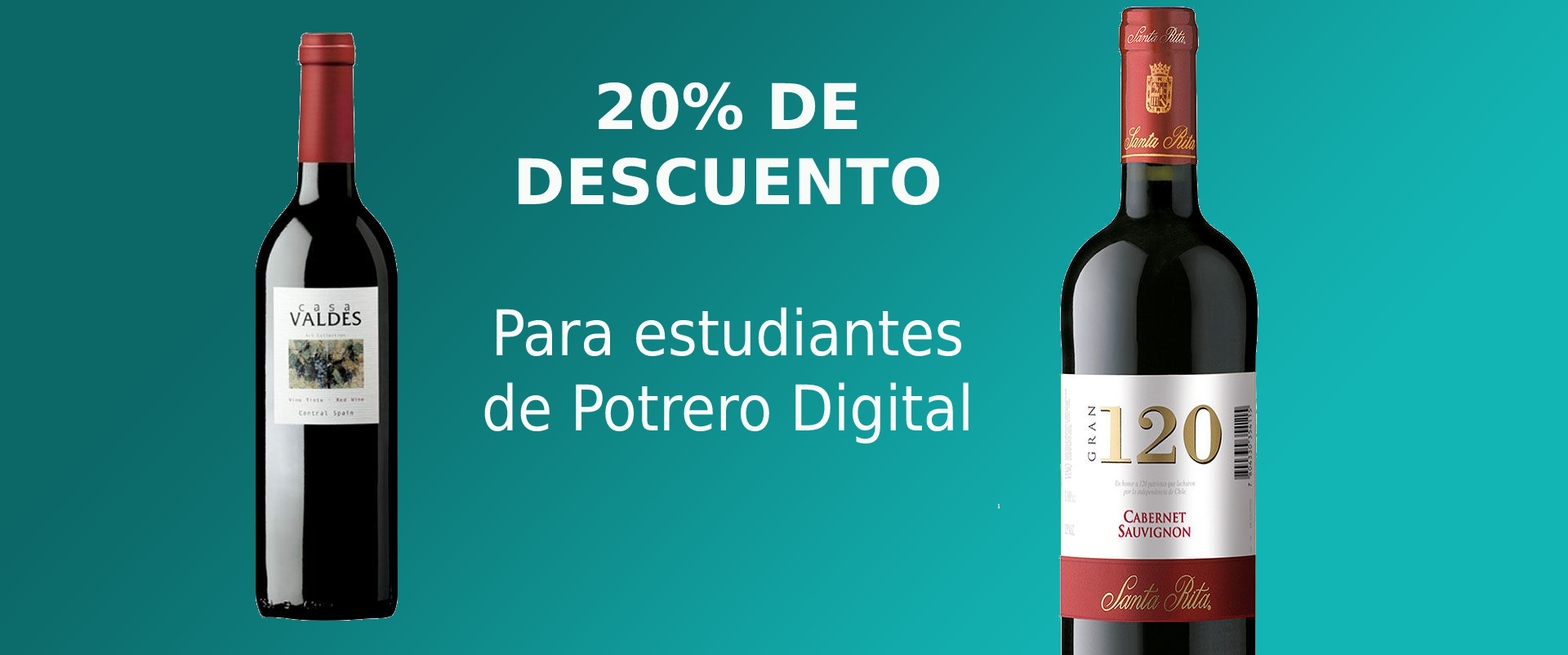
<style>
.page{position:relative;width:1568px;height:655px}
.page>*{position:absolute;margin:0}
.t1{font:62.9px "DejaVuSansCondensed";color:#f9fbf9}
.t2{font:62.9px "DejaVuSans-Bold";color:#f9fbf9}
</style>
<div class="page">
<p class="t1" style="left:484px;top:82px;width:485px;height:362px;text-align:center"><span class="t2">20% DE DESCUENTO<br><br></span>Para estudiantes de Potrero Digital</p>
</div>
